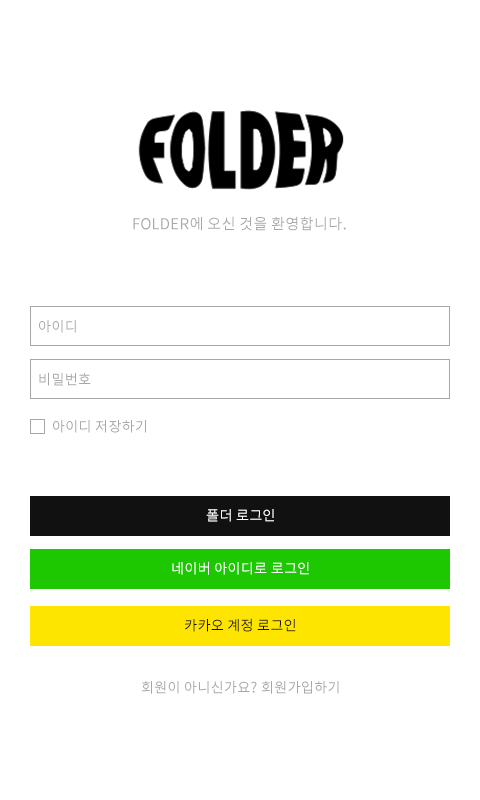
<style>
.page{position:relative;width:480px;height:800px;background:#ffffff}
.page>*{position:absolute;margin:0}
.t1{font:15px "NotoSansKR-Regular";letter-spacing:0.02em;color:#a7a7a7}
.t2{font:14px "NotoSansKR-Regular";letter-spacing:0.02em;color:#a7a7a7}
.t3{font:14px "NotoSansKR-Regular";letter-spacing:0.02em;color:#ffffff}
.t4{font:14px "NotoSansKR-Regular";letter-spacing:0.02em;color:#111111}
</style>
<div class="page">
<p class="t1" style="left:133px;top:216px;width:213px;height:15px">FOLDER에 오신 것을 환영합니다.</p>
<p class="t2" style="left:39px;top:320px;width:37px;height:13px">아이디</p>
<p class="t2" style="left:39px;top:372px;width:52px;height:14px">비밀번호</p>
<p class="t2" style="left:53px;top:420px;width:93px;height:13px">아이디 저장하기</p>
<p class="t3" style="left:206px;top:509px;width:68px;height:13px">폴더 로그인</p>
<p class="t3" style="left:172px;top:561px;width:137px;height:14px">네이버 아이디로 로그인</p>
<p class="t4" style="left:185px;top:618px;width:111px;height:14px">카카오 계정 로그인</p>
<p class="t2" style="left:142px;top:681px;width:197px;height:13px">회원이 아니신가요? 회원가입하기</p>
</div>
